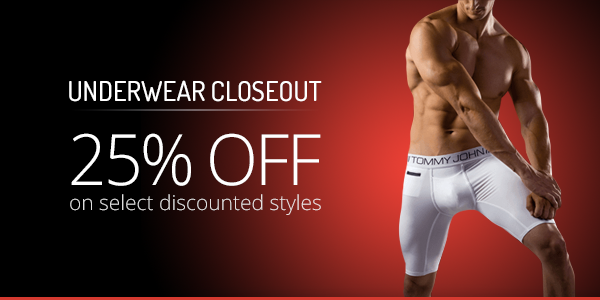
<style>
.page{position:relative;width:600px;height:300px;background:#000000}
.page>*{position:absolute;margin:0}
.t1{font:27.2px "Dosis-Medium";color:#ffffff}
.t2{font:70.8px "OpenSans-Light";letter-spacing:-0.04em;color:#ffffff;scale:0.96 1}
.t3{font:20.9px "OpenSans-Light";color:#dfdfdf}
</style>
<div class="page">
<p class="t1" style="left:69px;top:80px;width:253px;height:22px">UNDERWEAR CLOSEOUT</p>
<p class="t2" style="left:71px;top:133px;width:250px;height:53px">25% OFF</p>
<p class="t3" style="left:70px;top:194px;width:251px;height:21px">on select discounted styles</p>
</div>
